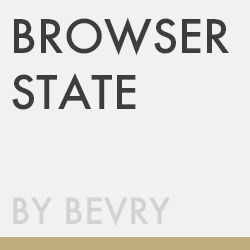
<style>
.page{position:relative;width:250px;height:250px;background:#f1f1f1}
.page>*{position:absolute;margin:0}
.t1{font:45px/56.2px "Futura-Medium";color:#3d3d3d;text-transform:uppercase}
.t2{font:35px "Futura-Medium";color:#d2d2d2;text-transform:uppercase}
</style>
<div class="page">
<p class="t1" style="left:12px;top:17px;width:217px;height:93px">browser<br>state</p>
<p class="t2" style="left:13px;top:197px;width:158px;height:29px">by bevry</p>
</div>
